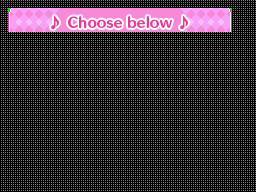
<style>
.page{position:relative;width:256px;height:192px;background:#000000}
.page>*{position:absolute;margin:0}
.t1{font:13px "HummingStd-E";letter-spacing:0.025em;color:#e83898}
</style>
<div class="page">
<p class="t1" style="left:51px;top:15px;width:137px;height:14px">♪ Choose below ♪</p>
</div>
